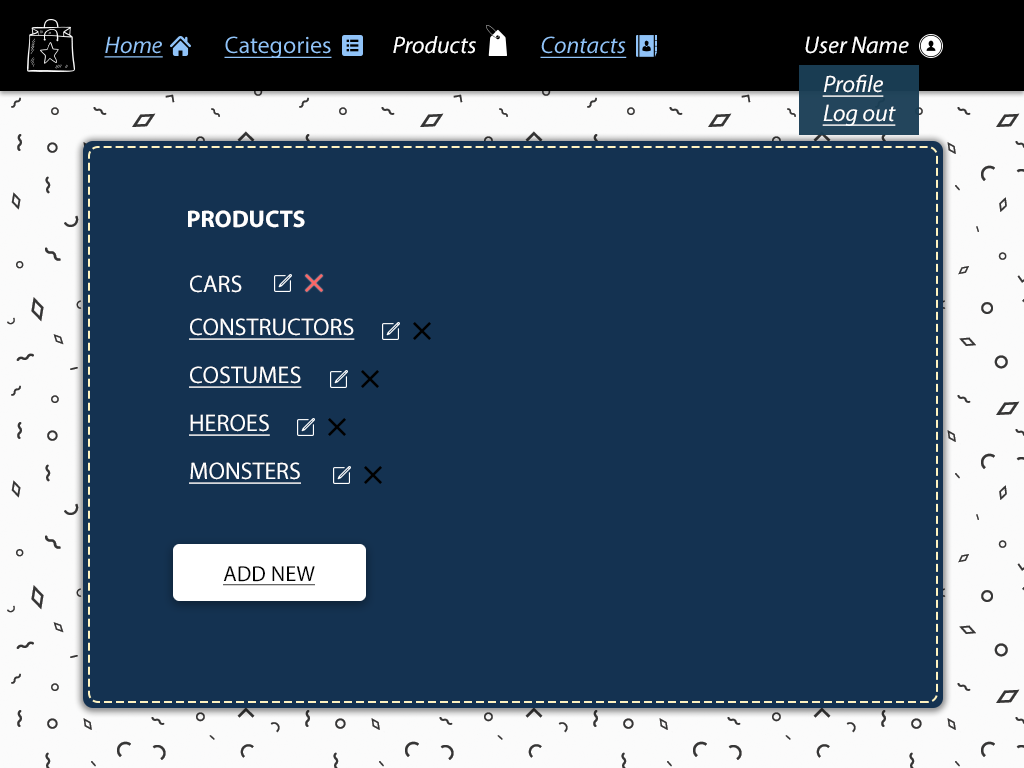
<style>
.page{position:relative;width:1024px;height:768px;background:#143251}
.page>*{position:absolute;margin:0}
.t1{font:24px "MyriadPro-It";color:#90c3f8;text-decoration:underline}
.t2{font:24px "MyriadPro-Regular";color:#90c3f8;text-decoration:underline}
.t3{font:24px "MyriadPro-It";color:#ffffff}
.t4{font:24px "MyriadPro-It";color:#ffffff;text-decoration:underline}
.t5{font:24px "MyriadPro-Bold";color:#ffffff;text-transform:uppercase}
.t6{font:24px "MyriadPro-Regular";color:#ffffff;text-transform:uppercase}
.t7{font:24px "MyriadPro-Regular";color:#ffffff}
.t8{font:24px "MyriadPro-Regular";color:#ffffff;text-transform:uppercase;text-decoration:underline}
.t9{font:22px "MyriadPro-Regular";color:#020202;text-transform:uppercase;text-decoration:underline}
</style>
<div class="page">
<p class="t1" style="left:104px;top:36px;width:59px;height:22px">Home</p>
<p class="t2" style="left:224px;top:36px;width:108px;height:22px">Categories</p>
<p class="t3" style="left:393px;top:36px;width:83px;height:18px">Products</p>
<p class="t1" style="left:540px;top:36px;width:87px;height:22px">Contacts</p>
<p class="t3" style="left:805px;top:36px;width:104px;height:18px">User Name</p>
<p class="t4" style="left:822px;top:74px;width:62px;height:23px">Profile</p>
<p class="t4" style="left:822px;top:104px;width:74px;height:22px">Log out</p>
<p class="t5" style="left:188px;top:210px;width:117px;height:18px">products</p>
<p class="t6" style="left:190px;top:275px;width:52px;height:18px"><span class="t7">C</span>ars</p>
<p class="t8" style="left:189px;top:318px;width:166px;height:22px">constructors</p>
<p class="t8" style="left:189px;top:366px;width:113px;height:22px">costumes</p>
<p class="t8" style="left:189px;top:414px;width:81px;height:22px">heroes</p>
<p class="t8" style="left:189px;top:462px;width:112px;height:22px">monsters</p>
<p class="t9" style="left:223px;top:566px;width:92px;height:20px">Add new</p>
</div>
